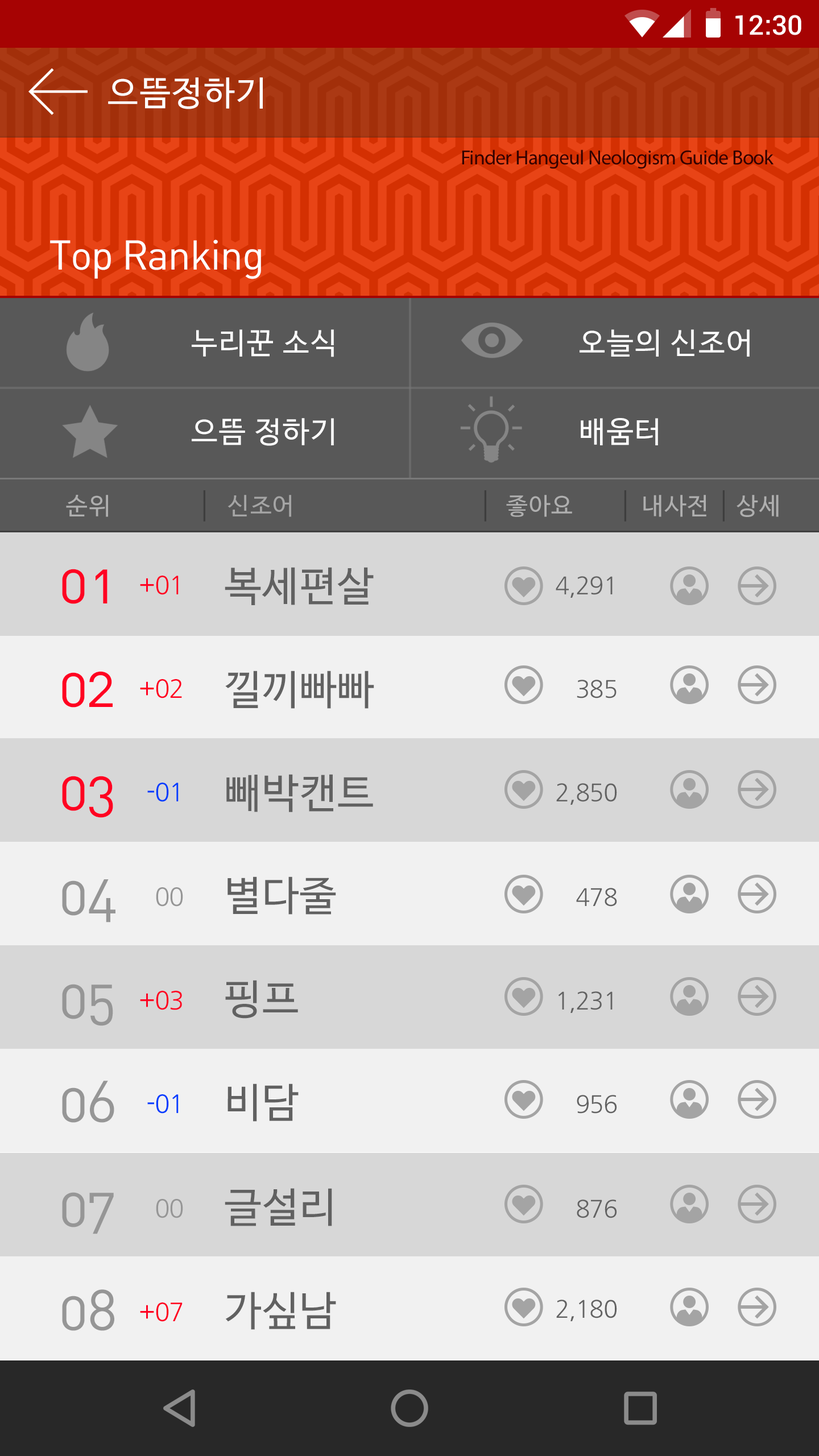
<style>
.page{position:relative;width:819px;height:1456px;background:#f1f1f1}
.page>*{position:absolute;margin:0}
.t1{font:27.3px "Roboto-Medium";color:#ffffff}
.t2{font:34.1px "NanumBarunGothic";letter-spacing:0.05em;color:#ffffff}
.t3{font:20.5px "MyriadPro-Regular";letter-spacing:-0.025em;color:#310101}
.t4{font:40.9px "DINAlternate-Regular";letter-spacing:-0.025em;color:#ffffff}
.t5{font:29.6px "NanumBarunGothic";letter-spacing:0.05em;color:#ffffff}
.t6{font:23.9px "NanumBarunGothic";letter-spacing:0.05em;color:#afafaf}
.t7{font:33.4px "NanumBarunGothic";letter-spacing:0.05em;color:#3e3e3e;scale:0.71 1}
.t8{font:23.9px "NanumBarunGothic";letter-spacing:0.05em;color:#a5a5a5}
.t9{font:56.9px "DINAlternate-Regular";letter-spacing:0.075em;color:#ff0222}
.t10{font:40.9px "NanumBarunGothic";letter-spacing:0.025em;color:#616161}
.t11{font:25px "NanumGothic";letter-spacing:-0.025em;color:#ff0222}
.t12{font:23.9px "NanumGothic";letter-spacing:-0.025em;color:#626262}
.t13{font:56.9px "DINAlternate-Regular";letter-spacing:-0.025em;color:#ff0222}
.t14{font:25px "NanumGothic";letter-spacing:-0.025em;color:#023dff}
.t15{font:56.9px "DINAlternate-Regular";letter-spacing:-0.025em;color:#969696}
.t16{font:25px "NanumGothic";letter-spacing:-0.025em;color:#969696}
</style>
<div class="page">
<p class="t1" style="left:735px;top:15px;width:66px;height:20px">12:30</p>
<p class="t2" style="left:108px;top:77px;width:155px;height:32px">으뜸정하기</p>
<p class="t3" style="left:462px;top:150px;width:312px;height:19px">Finder Hangeul Neologism Guide Book</p>
<p class="t4" style="left:50px;top:239px;width:211px;height:40px">Top Ranking</p>
<p class="t5" style="left:192px;top:329px;width:142px;height:28px">누리꾼 소식</p>
<p class="t5" style="left:580px;top:329px;width:170px;height:28px">오늘의 신조어</p>
<p class="t5" style="left:192px;top:418px;width:142px;height:28px">으뜸 정하기</p>
<p class="t5" style="left:581px;top:418px;width:77px;height:27px">배움터</p>
<p class="t6" style="left:66px;top:495px;width:42px;height:22px">순위</p>
<p class="t7" style="left:203px;top:490px;width:2px;height:32px">|</p>
<p class="t8" style="left:227px;top:495px;width:64px;height:22px">신조어</p>
<p class="t7" style="left:484px;top:490px;width:2px;height:32px">|</p>
<p class="t6" style="left:506px;top:495px;width:66px;height:22px">좋아요</p>
<p class="t7" style="left:624px;top:490px;width:2px;height:32px">|</p>
<p class="t6" style="left:643px;top:495px;width:63px;height:22px">내사전</p>
<p class="t7" style="left:722px;top:490px;width:3px;height:32px">|</p>
<p class="t6" style="left:737px;top:495px;width:42px;height:22px">상세</p>
<p class="t9" style="left:62px;top:569px;width:45px;height:35px">01</p>
<p class="t10" style="left:225px;top:567px;width:149px;height:38px">복세편살</p>
<p class="t11" style="left:140px;top:576px;width:39px;height:19px">+01</p>
<p class="t12" style="left:556px;top:576px;width:57px;height:22px">4,291</p>
<p class="t13" style="left:62px;top:671px;width:51px;height:37px">02</p>
<p class="t10" style="left:225px;top:671px;width:149px;height:38px">낄끼빠빠</p>
<p class="t11" style="left:140px;top:679px;width:42px;height:19px">+02</p>
<p class="t12" style="left:577px;top:680px;width:40px;height:18px">385</p>
<p class="t13" style="left:62px;top:776px;width:51px;height:42px">03</p>
<p class="t14" style="left:147px;top:783px;width:32px;height:19px">-01</p>
<p class="t10" style="left:226px;top:774px;width:147px;height:38px">빼박캔트</p>
<p class="t12" style="left:556px;top:783px;width:61px;height:22px">2,850</p>
<p class="t15" style="left:62px;top:879px;width:53px;height:44px">04</p>
<p class="t10" style="left:227px;top:876px;width:109px;height:39px">별다줄</p>
<p class="t16" style="left:156px;top:887px;width:27px;height:20px">00</p>
<p class="t12" style="left:576px;top:888px;width:41px;height:19px">478</p>
<p class="t15" style="left:62px;top:984px;width:51px;height:42px">05</p>
<p class="t10" style="left:225px;top:980px;width:73px;height:39px">핑프</p>
<p class="t11" style="left:140px;top:991px;width:42px;height:19px">+03</p>
<p class="t12" style="left:559px;top:991px;width:54px;height:22px">1,231</p>
<p class="t15" style="left:62px;top:1081px;width:52px;height:42px">06</p>
<p class="t10" style="left:227px;top:1083px;width:72px;height:39px">비담</p>
<p class="t14" style="left:147px;top:1094px;width:32px;height:20px">-01</p>
<p class="t12" style="left:577px;top:1095px;width:40px;height:19px">956</p>
<p class="t15" style="left:62px;top:1192px;width:52px;height:42px">07</p>
<p class="t10" style="left:225px;top:1188px;width:107px;height:38px">글설리</p>
<p class="t16" style="left:156px;top:1199px;width:27px;height:19px">00</p>
<p class="t12" style="left:577px;top:1199px;width:40px;height:19px">876</p>
<p class="t15" style="left:62px;top:1289px;width:52px;height:42px">08</p>
<p class="t10" style="left:225px;top:1292px;width:111px;height:38px">가싶남</p>
<p class="t12" style="left:556px;top:1300px;width:61px;height:21px">2,180</p>
<p class="t11" style="left:140px;top:1302px;width:43px;height:20px">+07</p>
</div>
